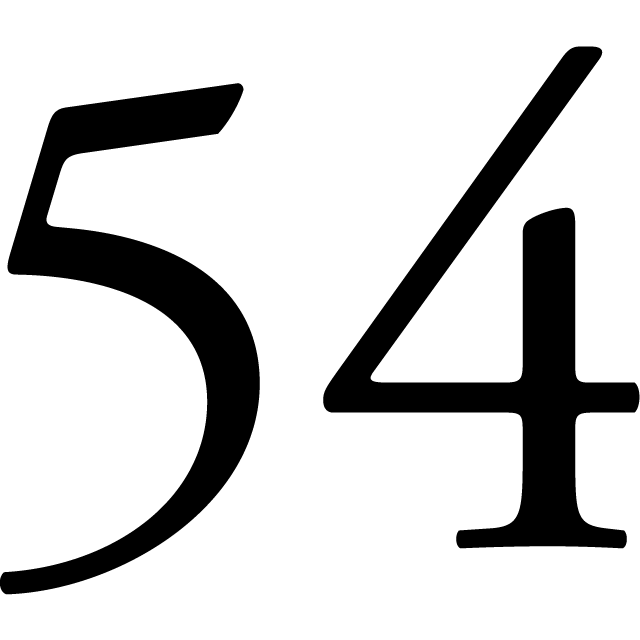
<style>
.page{position:relative;width:640px;height:640px;background:#ffffff}
.page>*{position:absolute;margin:0}
.t1{font:707.4px "AGaramondPro-Regular";color:#000000}
</style>
<div class="page">
<p class="t1" style="left:0px;top:46px;width:640px;height:549px">54</p>
</div>
